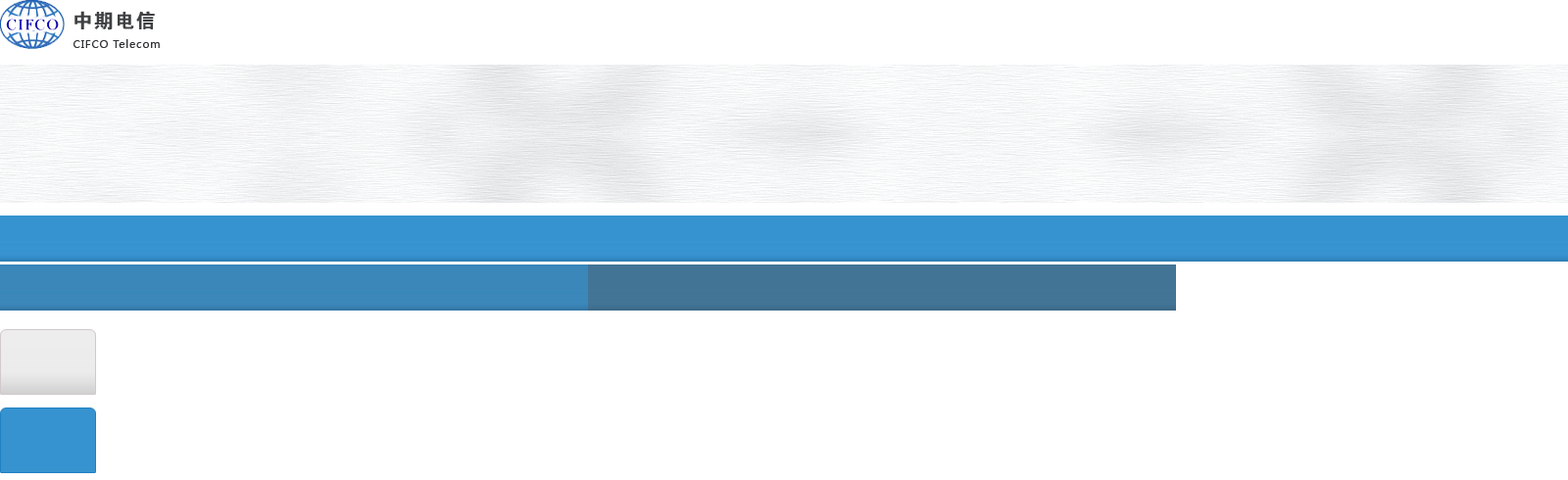
<style>
.page{position:relative;width:1568px;height:480px;background:#ffffff}
.page>*{position:absolute;margin:0}
.t1{font:19.6px "FZDHTJW--GB1-0";letter-spacing:0.075em;color:#3f4043}
.t2{font:10.8px "MicrosoftYaHei";letter-spacing:0.075em;color:#323336}
</style>
<div class="page">
<p class="t1" style="left:74px;top:11px;width:81px;height:19px">中期电信</p>
<p class="t2" style="left:74px;top:39px;width:86px;height:9px">CIFCO Telecom</p>
</div>
